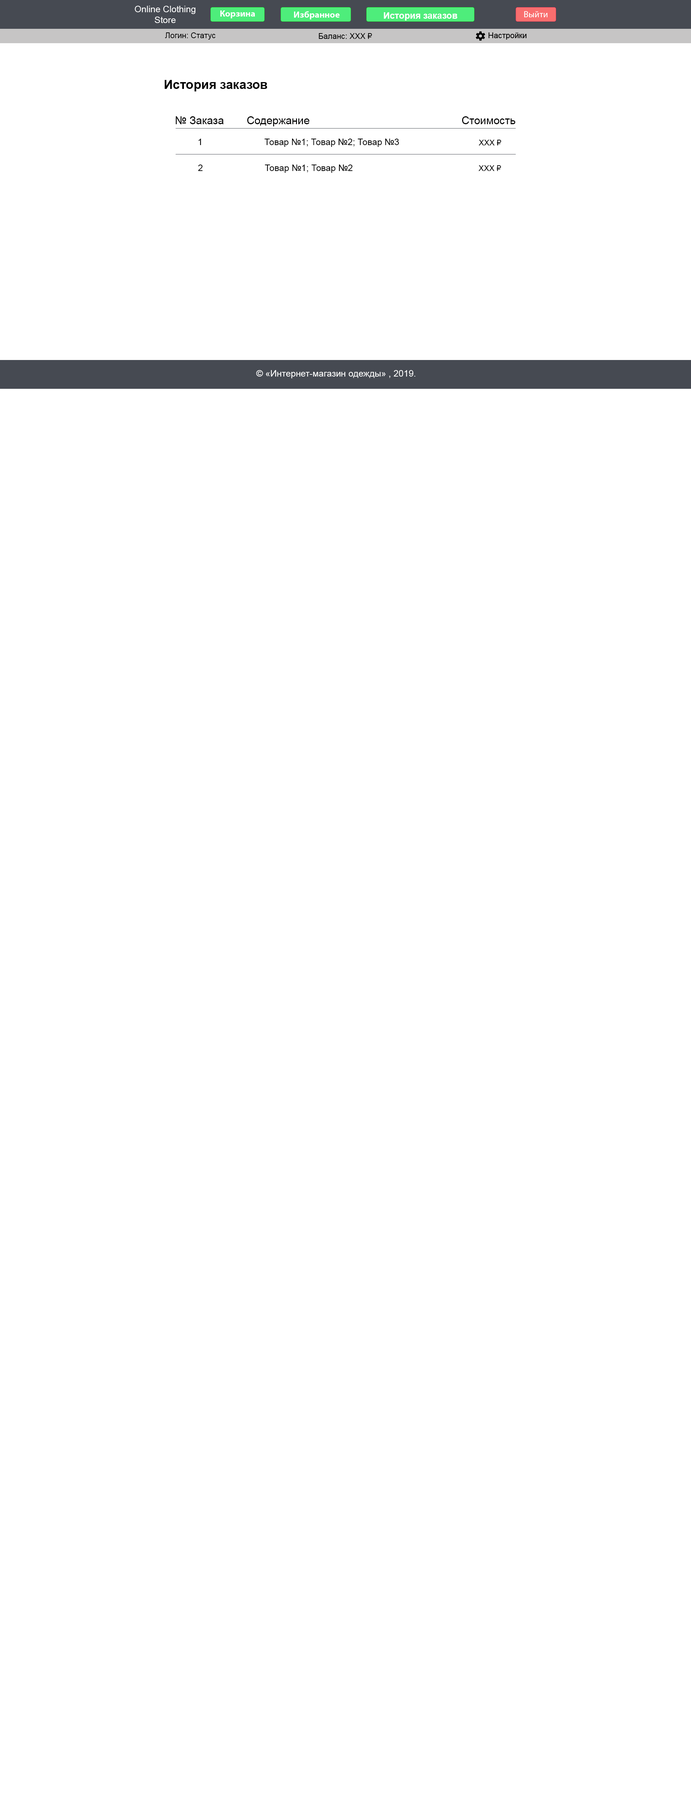
<style>
.page{position:relative;width:691px;height:1800px;background:#ffffff}
.page>*{position:absolute;margin:0}
.t1{font:9px "ArialMT";color:#ffffff}
.t2{font:7.9px "ArialMT";color:#000000}
.t3{font:12.6px "Arial-BoldMT";color:#000000}
.t4{font:10.8px "ArialMT";color:#000000}
.t5{font:9px "ArialMT";color:#000000}
</style>
<div class="page">
<p class="t1" style="left:135px;top:6px;width:60px;height:17px;text-align:center">Online Clothing<br>Store</p>
<p class="t2" style="left:165px;top:32px;width:51px;height:8px">Логин: Статус</p>
<p class="t2" style="left:319px;top:33px;width:53px;height:6px">Баланс: XXX ₽</p>
<p class="t3" style="left:165px;top:80px;width:102px;height:11px">История заказов</p>
<p class="t4" style="left:176px;top:116px;width:48px;height:8px">№ Заказа</p>
<p class="t4" style="left:247px;top:116px;width:63px;height:10px">Содержание</p>
<p class="t4" style="left:462px;top:116px;width:54px;height:8px">Стоимость</p>
<p class="t5" style="left:198px;top:139px;width:3px;height:6px">1</p>
<p class="t5" style="left:265px;top:139px;width:134px;height:8px">Товар №1; Товар №2; Товар №3</p>
<p class="t2" style="left:479px;top:140px;width:22px;height:5px">XXX ₽</p>
<p class="t5" style="left:198px;top:165px;width:5px;height:6px">2</p>
<p class="t5" style="left:265px;top:165px;width:88px;height:8px">Товар №1; Товар №2</p>
<p class="t2" style="left:478px;top:165px;width:23px;height:6px">XXX ₽</p>
<p class="t1" style="left:256px;top:370px;width:159px;height:8px">© «Интернет-магазин одежды» , 2019.</p>
</div>
